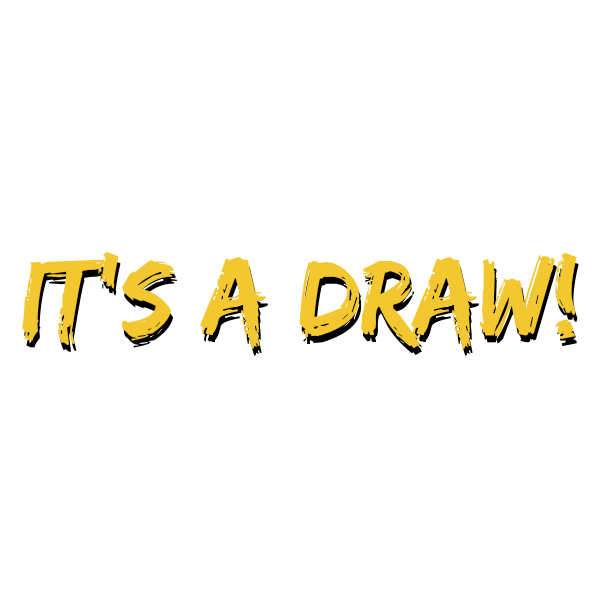
<style>
.page{position:relative;width:600px;height:600px;background:#ffffff}
.page>*{position:absolute;margin:0}
.t1{font:110px "EdoSZ";color:#f3c730}
.t2{font:110px "EdoSZ"}
</style>
<div class="page">
<p class="t1" style="left:22px;top:251px;width:555px;height:98px">It’s a draw!</p>
<p class="t2" style="left:24px;top:258px;width:555px;height:98px">It’s a draw!</p>
</div>
